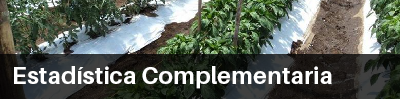
<style>
.page{position:relative;width:400px;height:99px}
.page>*{position:absolute;margin:0}
.t1{font:24px "Aileron-Bold";color:#ffffff}
</style>
<div class="page">
<p class="t1" style="left:14px;top:66px;width:318px;height:23px">Estadística Complementaria</p>
</div>
